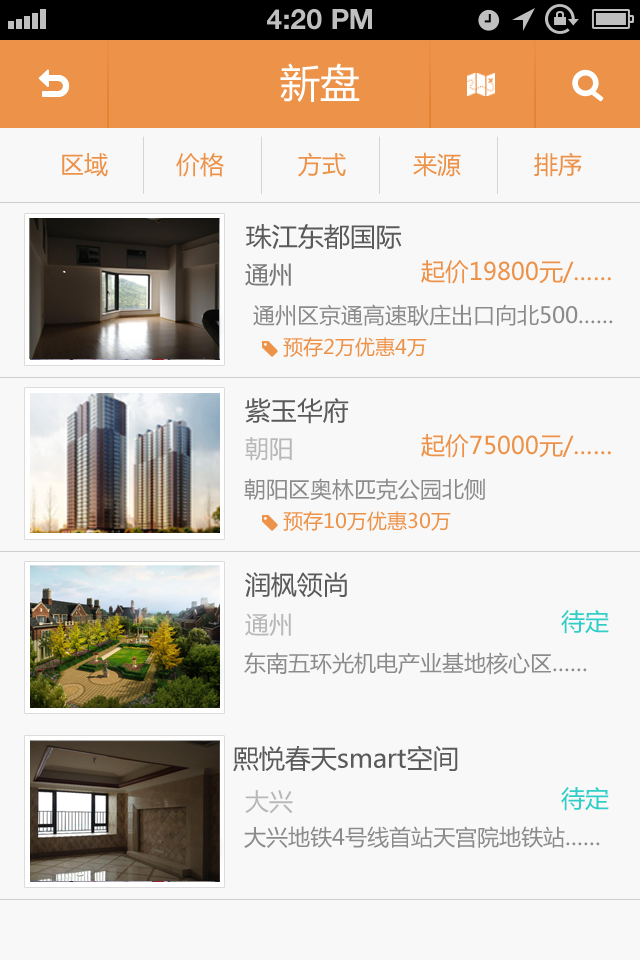
<style>
.page{position:relative;width:640px;height:960px;background:#f8f8f8}
.page>*{position:absolute;margin:0}
.t1{font:28px "HelveticaNeue-Bold";color:#bfbfbf;text-transform:uppercase}
.t2{font:40px "MicrosoftYaHei";color:#ffffff}
.t3{font:24px "MicrosoftYaHei";color:#ed9249}
.t4{font:26px "MicrosoftYaHei";color:#5a5a5a}
.t5{font:24px "MicrosoftYaHei";color:#797979}
.t6{font:22px "MicrosoftYaHei";color:#8b8b8b}
.t7{font:20px "MicrosoftYaHei";color:#ed9249}
.t8{font:24px "MicrosoftYaHei";color:#b8b8b8}
.t9{font:24px "MicrosoftYaHei";color:#31cec8}
</style>
<div class="page">
<p class="t1" style="left:267px;top:9px;width:105px;height:21px">4:20 PM</p>
<p class="t2" style="left:280px;top:63px;width:80px;height:39px">新盘</p>
<p class="t3" style="left:62px;top:153px;width:46px;height:24px">区域</p>
<p class="t3" style="left:176px;top:153px;width:48px;height:24px">价格</p>
<p class="t3" style="left:298px;top:152px;width:48px;height:25px">方式</p>
<p class="t3" style="left:413px;top:152px;width:48px;height:25px">来源</p>
<p class="t3" style="left:534px;top:152px;width:48px;height:25px">排序</p>
<p class="t4" style="left:246px;top:224px;width:156px;height:26px">珠江东都国际</p>
<p class="t5" style="left:245px;top:263px;width:46px;height:23px">通州</p>
<p class="t3" style="left:421px;top:260px;width:190px;height:24px">起价19800元/……</p>
<p class="t6" style="left:253px;top:304px;width:360px;height:22px">通州区京通高速耿庄出口向北500……</p>
<p class="t7" style="left:283px;top:337px;width:144px;height:20px">预存2万优惠4万</p>
<p class="t4" style="left:245px;top:398px;width:104px;height:26px">紫玉华府</p>
<p class="t8" style="left:245px;top:437px;width:47px;height:24px">朝阳</p>
<p class="t3" style="left:421px;top:434px;width:190px;height:24px">起价75000元/……</p>
<p class="t6" style="left:244px;top:478px;width:241px;height:22px">朝阳区奥林匹克公园北侧</p>
<p class="t7" style="left:283px;top:511px;width:168px;height:20px">预存10万优惠30万</p>
<p class="t4" style="left:245px;top:572px;width:102px;height:26px">润枫领尚</p>
<p class="t8" style="left:245px;top:613px;width:46px;height:23px">通州</p>
<p class="t9" style="left:561px;top:610px;width:48px;height:24px">待定</p>
<p class="t6" style="left:244px;top:652px;width:343px;height:23px">东南五环光机电产业基地核心区……</p>
<p class="t4" style="left:233px;top:745px;width:225px;height:27px">熙悦春天smart空间</p>
<p class="t8" style="left:245px;top:790px;width:48px;height:24px">大兴</p>
<p class="t9" style="left:561px;top:787px;width:48px;height:24px">待定</p>
<p class="t6" style="left:244px;top:826px;width:356px;height:22px">大兴地铁4号线首站天宫院地铁站……</p>
</div>
